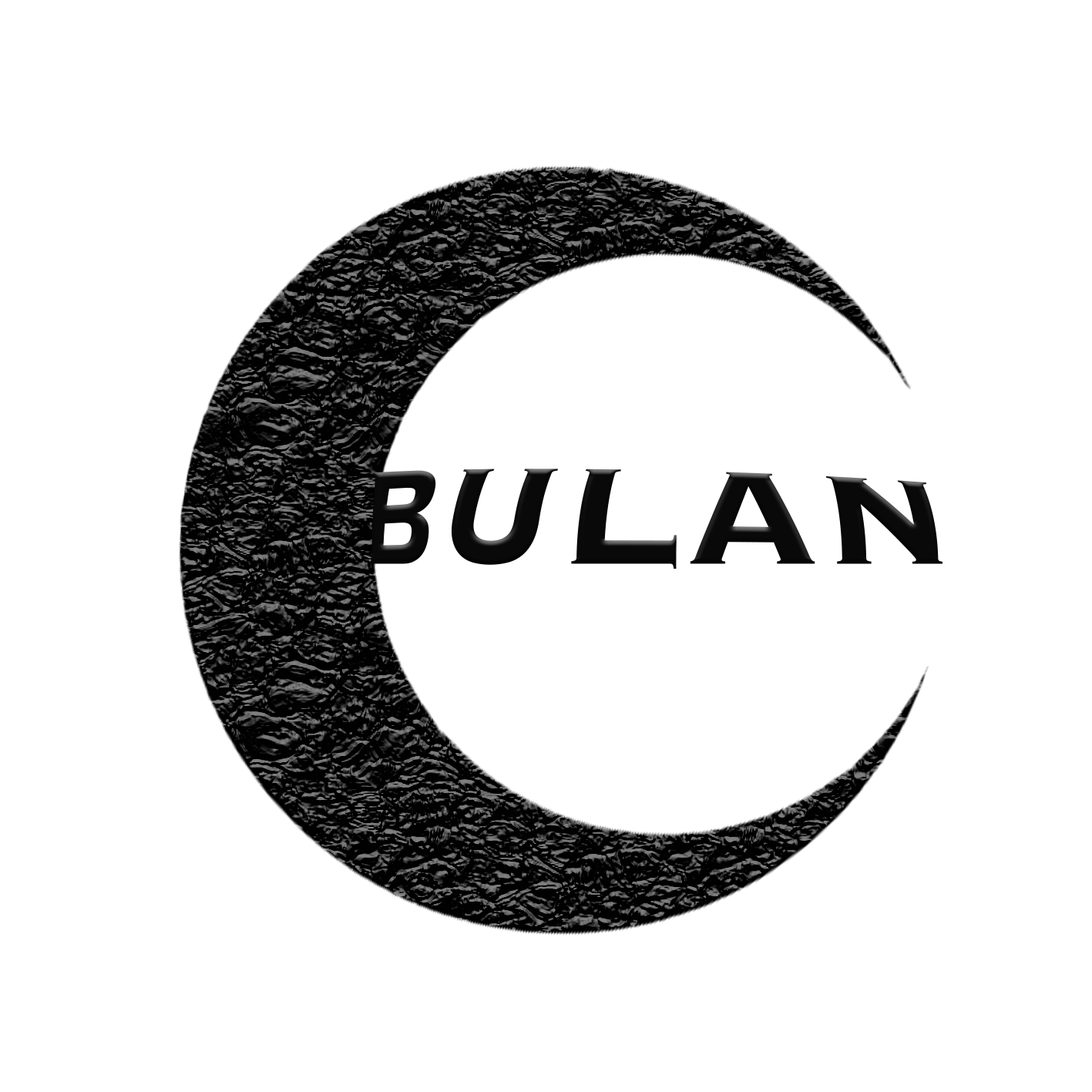
<style>
.page{position:relative;width:1092px;height:1092px;background:#ffffff}
.page>*{position:absolute;margin:0}
.t1{font:150.9px "Copperplate-Bold";color:#090909}
</style>
<div class="page">
<p class="t1" style="left:369px;top:469px;width:573px;height:100px">BULAN</p>
</div>
